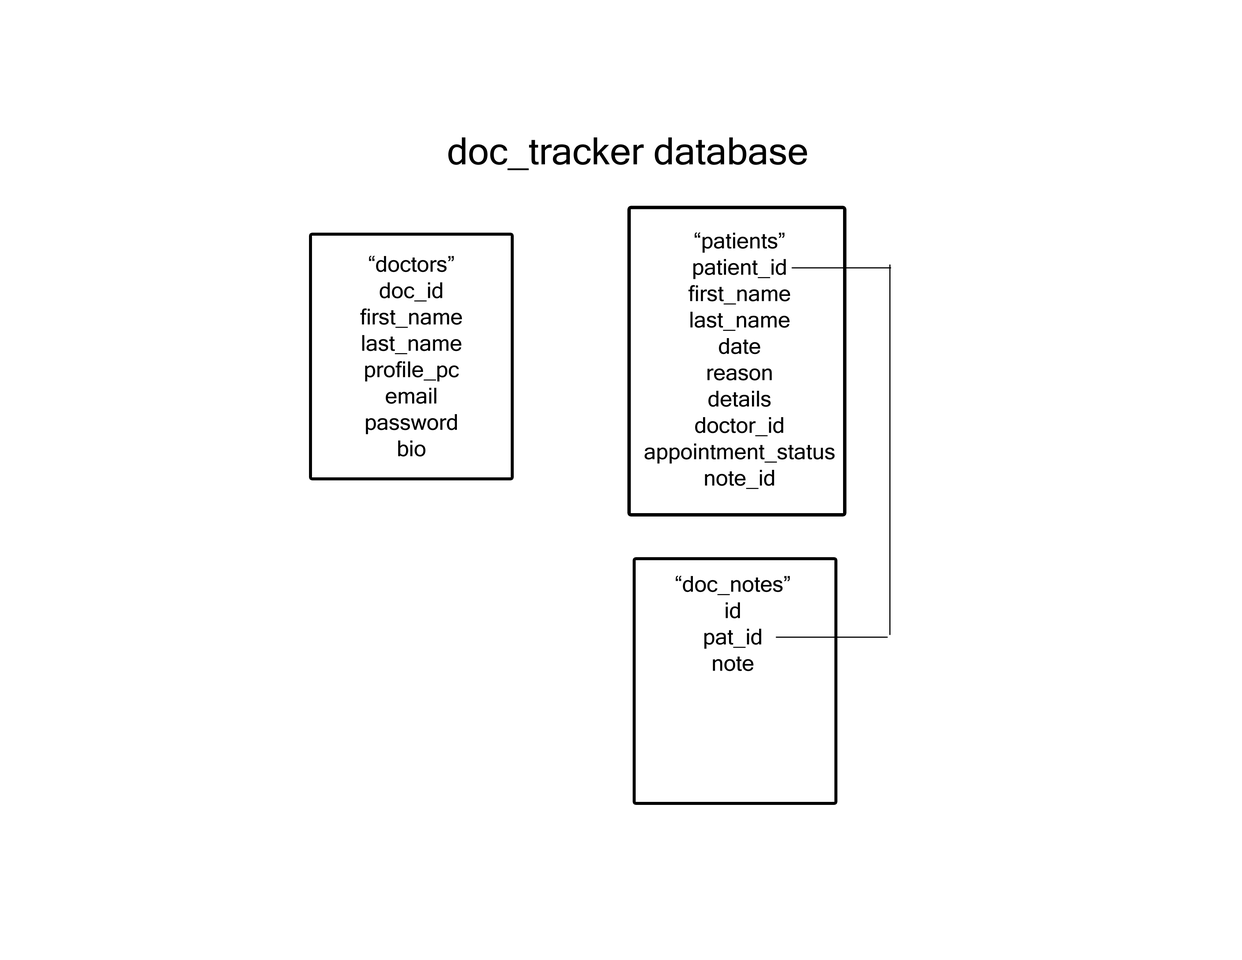
<style>
.page{position:relative;width:1242px;height:960px;background:#ffffff}
.page>*{position:absolute;margin:0}
.t1{font:37.6px "MicrosoftSansSerif";color:#000000}
.t2{font:22px "MicrosoftSansSerif";color:#000000}
</style>
<div class="page">
<p class="t1" style="left:448px;top:137px;width:359px;height:33px">doc_tracker database</p>
<p class="t2" style="left:644px;top:232px;width:191px;height:257px;text-align:center">“patients”<br>patient_id<br>first_name<br>last_name<br>date<br>reason<br>details<br>doctor_id<br>appointment_status<br>note_id</p>
<p class="t2" style="left:360px;top:256px;width:102px;height:201px;text-align:center">“doctors”<br>doc_id<br>first_name<br>last_name<br>profile_pc<br>email<br>password<br>bio</p>
<p class="t2" style="left:676px;top:576px;width:114px;height:95px;text-align:center">“doc_notes”<br>id<br>pat_id<br>note</p>
</div>
